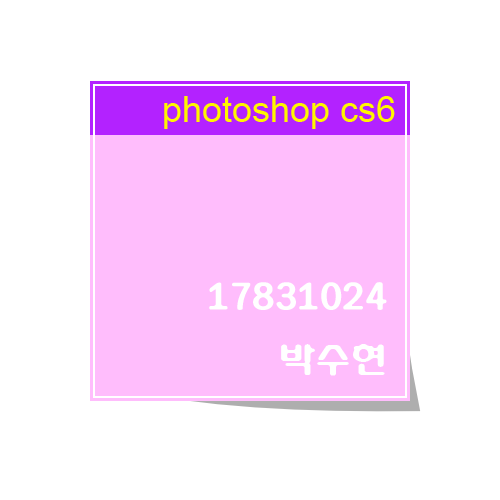
<style>
.page{position:relative;width:500px;height:500px;background:#ffffff}
.page>*{position:absolute;margin:0}
.t1{font:36px "ArialMT";color:#fff600}
.t2{font:36px "HYdnkB";color:#ffffff}
</style>
<div class="page">
<p class="t1" style="left:164px;top:96px;width:231px;height:33px">photoshop cs6</p>
<p class="t2" style="left:209px;top:282px;width:178px;height:94px;text-align:right">17831024<br>박수현</p>
</div>
